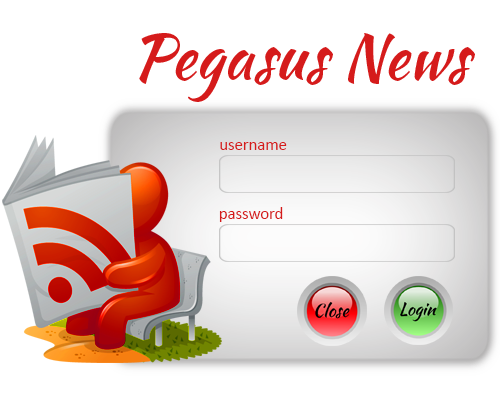
<style>
.page{position:relative;width:500px;height:400px;background:#ffffff}
.page>*{position:absolute;margin:0}
.t1{font:62.5px "KaushanScript-Regular";color:#d51b1b}
.t2{font:16.7px "Calibri";color:#d51b1b}
</style>
<div class="page">
<p class="t1" style="left:139px;top:33px;width:336px;height:69px">Pegasus News</p>
<p class="t2" style="left:220px;top:142px;width:67px;height:8px">username</p>
<p class="t2" style="left:219px;top:207px;width:64px;height:15px">password</p>
</div>
